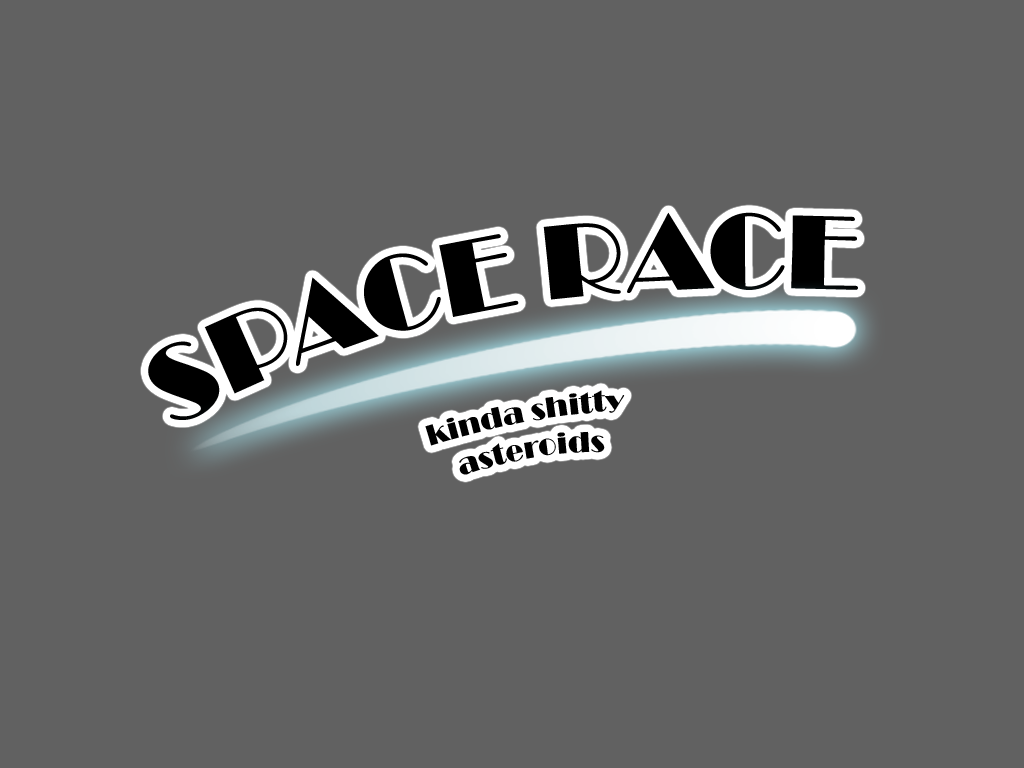
<style>
.page{position:relative;width:1024px;height:768px;background:#616161}
.page>*{position:absolute;margin:0}
.t1{font:109px "Broadway";color:#000000}
.t2{font:30px "Broadway";color:#000000}
</style>
<div class="page">
<p class="t1" style="left:148px;top:212px;width:710px;height:208px;text-align:center">SPACE RACE</p>
<p class="t2" style="left:425px;top:390px;width:200px;height:56px;rotate:-41deg">kinda shitty</p>
<p class="t2" style="left:459px;top:431px;width:146px;height:44px;rotate:-41deg">asteroids</p>
</div>
